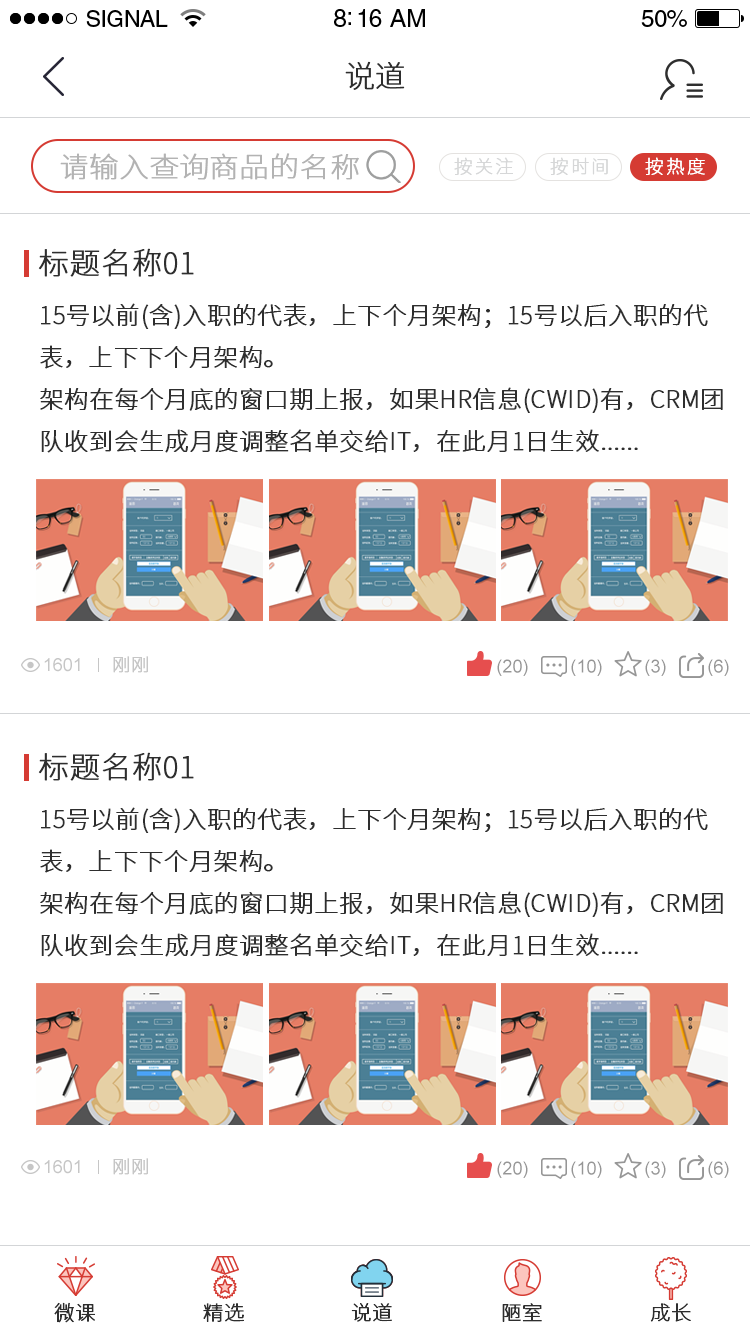
<style>
.page{position:relative;width:750px;height:1334px;background:#ffffff}
.page>*{position:absolute;margin:0}
.t1{font:23px "HelveticaLTStd-Roman";letter-spacing:-0.02em;color:#000000}
.t2{font:25px "HelveticaLTStd-Roman";letter-spacing:-0.02em;color:#000000}
.t3{font:24px "HelveticaLTStd-Roman";letter-spacing:-0.02em;color:#000000}
.t4{font:30px "SourceHanSansCN-ExtraLight";color:#2e2e2e;font-weight:bold}
.t5{font:28px "SourceHanSansCN-ExtraLight";color:#b3b3b3;font-weight:bold;scale:1.04 1}
.t6{font:18px "SourceHanSansCN-ExtraLight";letter-spacing:0.1em;color:#d6d7d8;font-weight:bold}
.t7{font:18px "SourceHanSansCN-ExtraLight";letter-spacing:0.1em;color:#ffffff;font-weight:bold}
.t8{font:24px "SourceHanSansCN-ExtraLight";color:#2e2e2e;font-weight:bold}
.t9{font:18px "ArialMT";color:#c6c6c6}
.t10{font:18px "SourceHanSansCN-ExtraLight";color:#c6c6c6;font-weight:bold}
.t11{font:18px "ArialMT";color:#969696}
.t12{font:20px "SourceHanSansCN-ExtraLight";color:#2e2e2e;font-weight:bold}
</style>
<div class="page">
<p class="t1" style="left:86px;top:10px;width:82px;height:17px">SIGNAL</p>
<p class="t2" style="left:334px;top:9px;width:91px;height:18px">8:16 AM</p>
<p class="t3" style="left:641px;top:10px;width:46px;height:17px">50%</p>
<p class="t4" style="left:345px;top:61px;width:60px;height:29px">说道</p>
<p class="t5" style="left:60px;top:153px;width:299px;height:27px">请输入查询商品的名称</p>
<p class="t6" style="left:454px;top:157px;width:59px;height:18px">按关注</p>
<p class="t6" style="left:550px;top:157px;width:58px;height:18px">按时间</p>
<p class="t7" style="left:645px;top:157px;width:60px;height:18px">按热度</p>
<p class="t4" style="left:38px;top:248px;width:156px;height:29px">标题名称01</p>
<p class="t8" style="left:40px;top:303px;width:683px;height:150px">15号以前(含)入职的代表，上下个月架构；15号以后入职的代表，上下下个月架构。<br>架构在每个月底的窗口期上报，如果HR信息(CWID)有，CRM团队收到会生成月度调整名单交给IT，在此月1日生效......</p>
<p class="t9" style="left:44px;top:658px;width:36px;height:14px">1601</p>
<p class="t10" style="left:113px;top:656px;width:35px;height:17px">刚刚</p>
<p class="t11" style="left:497px;top:659px;width:31px;height:17px">(20)</p>
<p class="t11" style="left:571px;top:659px;width:31px;height:17px">(10)</p>
<p class="t11" style="left:645px;top:659px;width:21px;height:17px">(3)</p>
<p class="t11" style="left:708px;top:659px;width:21px;height:17px">(6)</p>
<p class="t4" style="left:38px;top:752px;width:156px;height:29px">标题名称01</p>
<p class="t8" style="left:40px;top:807px;width:683px;height:150px">15号以前(含)入职的代表，上下个月架构；15号以后入职的代表，上下下个月架构。<br>架构在每个月底的窗口期上报，如果HR信息(CWID)有，CRM团队收到会生成月度调整名单交给IT，在此月1日生效......</p>
<p class="t10" style="left:113px;top:1158px;width:35px;height:17px">刚刚</p>
<p class="t9" style="left:44px;top:1160px;width:36px;height:14px">1601</p>
<p class="t11" style="left:497px;top:1161px;width:31px;height:17px">(20)</p>
<p class="t11" style="left:571px;top:1161px;width:31px;height:17px">(10)</p>
<p class="t11" style="left:645px;top:1161px;width:21px;height:17px">(3)</p>
<p class="t11" style="left:708px;top:1161px;width:21px;height:17px">(6)</p>
<p class="t12" style="left:54px;top:1302px;width:41px;height:21px">微课</p>
<p class="t12" style="left:203px;top:1303px;width:41px;height:19px">精选</p>
<p class="t12" style="left:351px;top:1303px;width:41px;height:19px">说道</p>
<p class="t12" style="left:502px;top:1303px;width:40px;height:19px">陋室</p>
<p class="t12" style="left:650px;top:1303px;width:41px;height:19px">成长</p>
</div>
